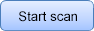
<style>
.page{position:relative;width:94px;height:31px}
.page>*{position:absolute;margin:0}
.t1{font:13.3px "ArialMT";color:#000000}
</style>
<div class="page">
<p class="t1" style="left:19px;top:11px;width:58px;height:11px">Start scan</p>
</div>
